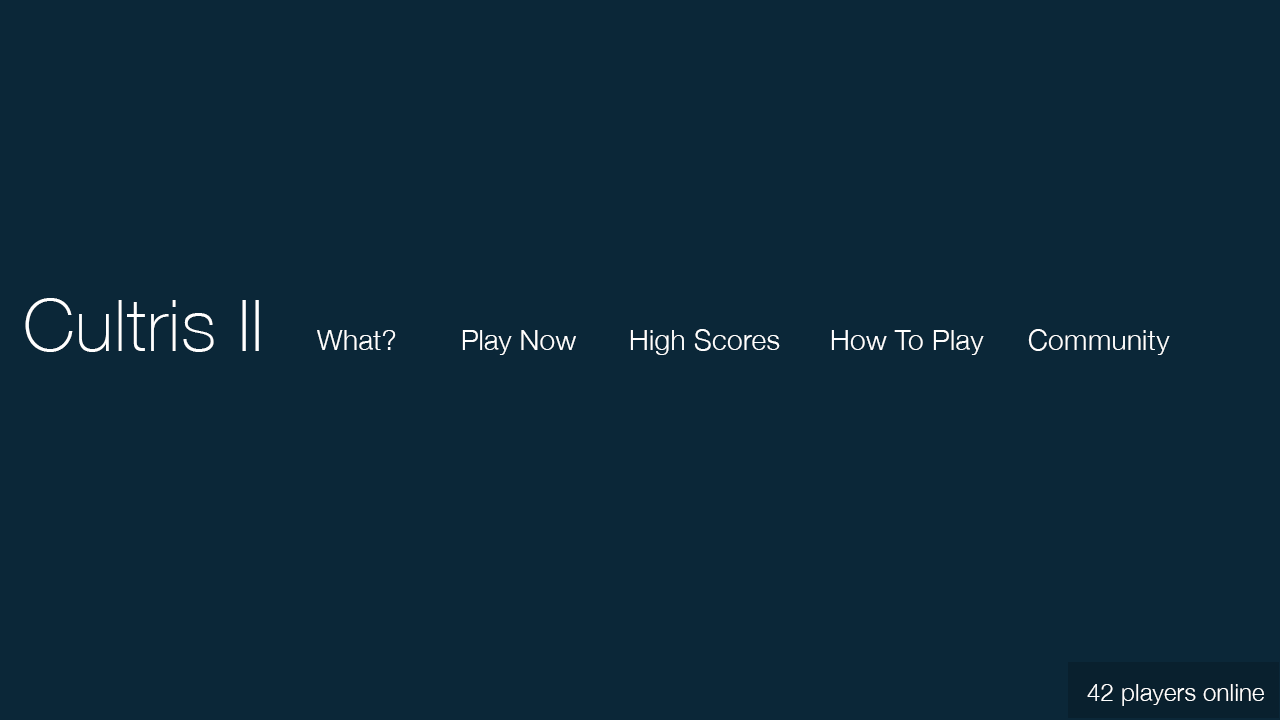
<style>
.page{position:relative;width:1280px;height:720px;background:#0b2738}
.page>*{position:absolute;margin:0}
.t1{font:72px "HelveticaNeue-Thin";letter-spacing:0.01em;color:#ffffff}
.t2{font:28.1px "HelveticaNeue-Light";letter-spacing:0.01em;color:#ffffff}
.t3{font:28.2px "HelveticaNeue-Light";color:#ffffff}
.t4{font:24px "HelveticaNeue-Light";letter-spacing:0.01em;color:#ffffff}
</style>
<div class="page">
<p class="t1" style="left:25px;top:298px;width:234px;height:54px">Cultris II</p>
<p class="t2" style="left:630px;top:329px;width:150px;height:26px">High Scores</p>
<p class="t2" style="left:1028px;top:329px;width:142px;height:26px">Community</p>
<p class="t2" style="left:317px;top:330px;width:79px;height:20px">What?</p>
<p class="t3" style="left:462px;top:330px;width:114px;height:25px">Play Now</p>
<p class="t2" style="left:831px;top:330px;width:153px;height:25px">How To Play</p>
<p class="t4" style="left:1087px;top:684px;width:177px;height:22px">42 players online</p>
</div>
